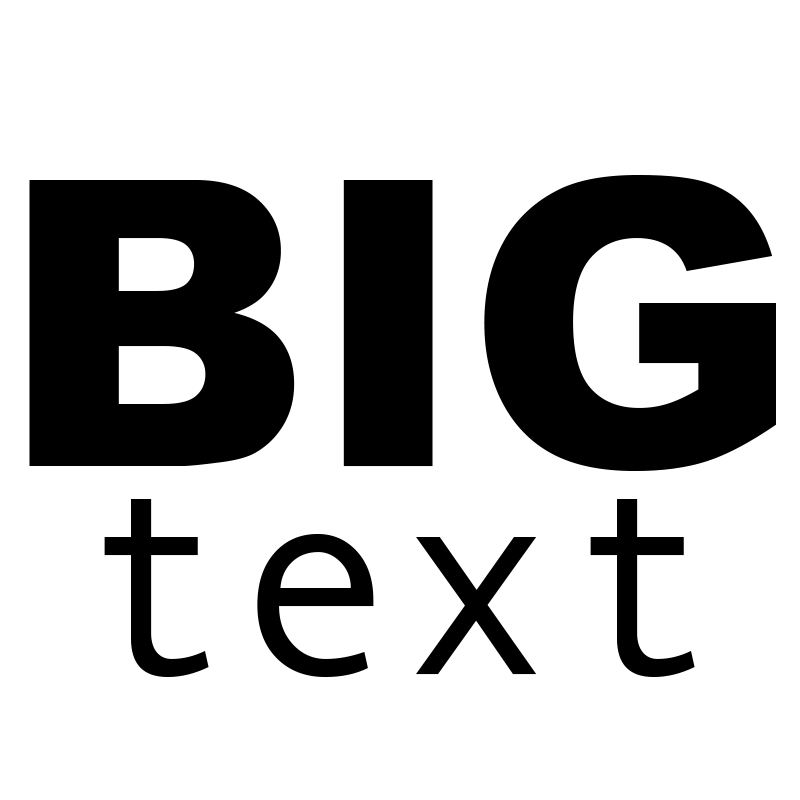
<style>
.page{position:relative;width:800px;height:800px;background:#ffffff}
.page>*{position:absolute;margin:0}
.t1{font:400px "Arial-Black";color:#000000}
.t2{font:270px "AndaleMono";color:#000000}
</style>
<div class="page">
<p class="t1" style="left:29px;top:175px;width:747px;height:296px">BIG</p>
<p class="t2" style="left:104px;top:499px;width:591px;height:178px">text</p>
</div>
